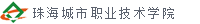
<style>
.page{position:relative;width:200px;height:24px;background:#ffffff}
.page>*{position:absolute;margin:0}
.t1{font:12px "SimSun";letter-spacing:0.2em;color:#5c626e}
</style>
<div class="page">
<p class="t1" style="left:33px;top:7px;width:141px;height:12px">珠海城市职业技术学院</p>
</div>
